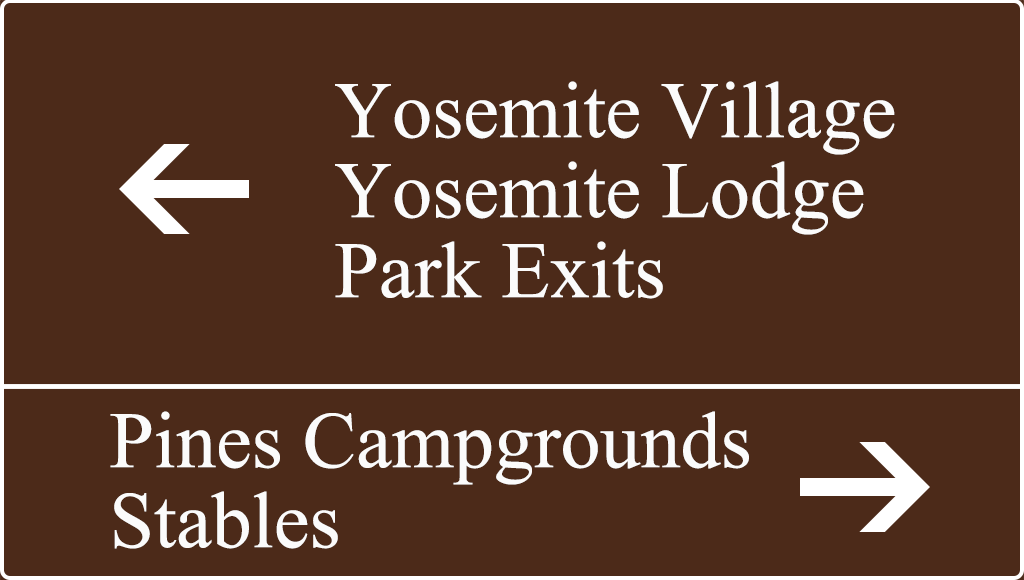
<style>
.page{position:relative;width:1024px;height:580px;background:#4c2a19}
.page>*{position:absolute;margin:0}
.t1{font:80px/80px "IskoolaPota";color:#fbfbfb}
</style>
<div class="page">
<p class="t1" style="left:335px;top:81px;width:560px;height:218px">Yosemite Village<br>Yosemite Lodge<br>Park Exits</p>
<p class="t1" style="left:110px;top:411px;width:639px;height:138px">Pines Campgrounds<br>Stables</p>
</div>
